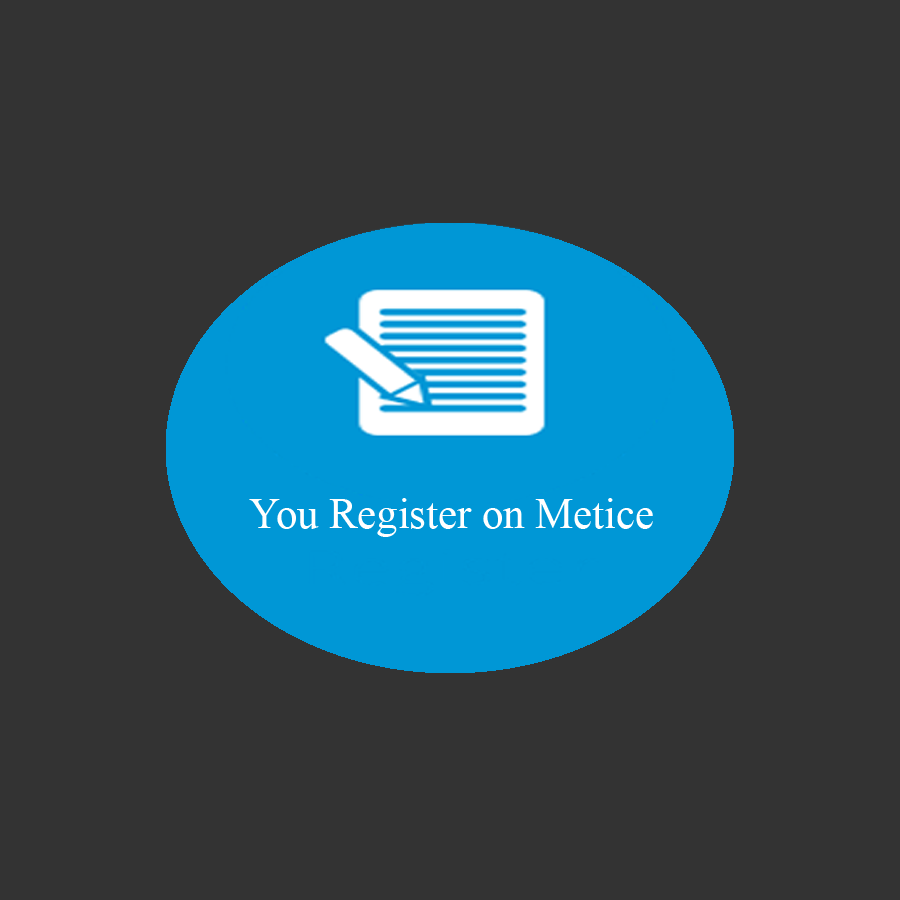
<style>
.page{position:relative;width:900px;height:900px;background:#333333}
.page>*{position:absolute;margin:0}
.t1{font:42.7px "TimesNewRomanPSMT";color:#ffffff}
</style>
<div class="page">
<p class="t1" style="left:249px;top:498px;width:404px;height:39px">You Register on Metice</p>
</div>
